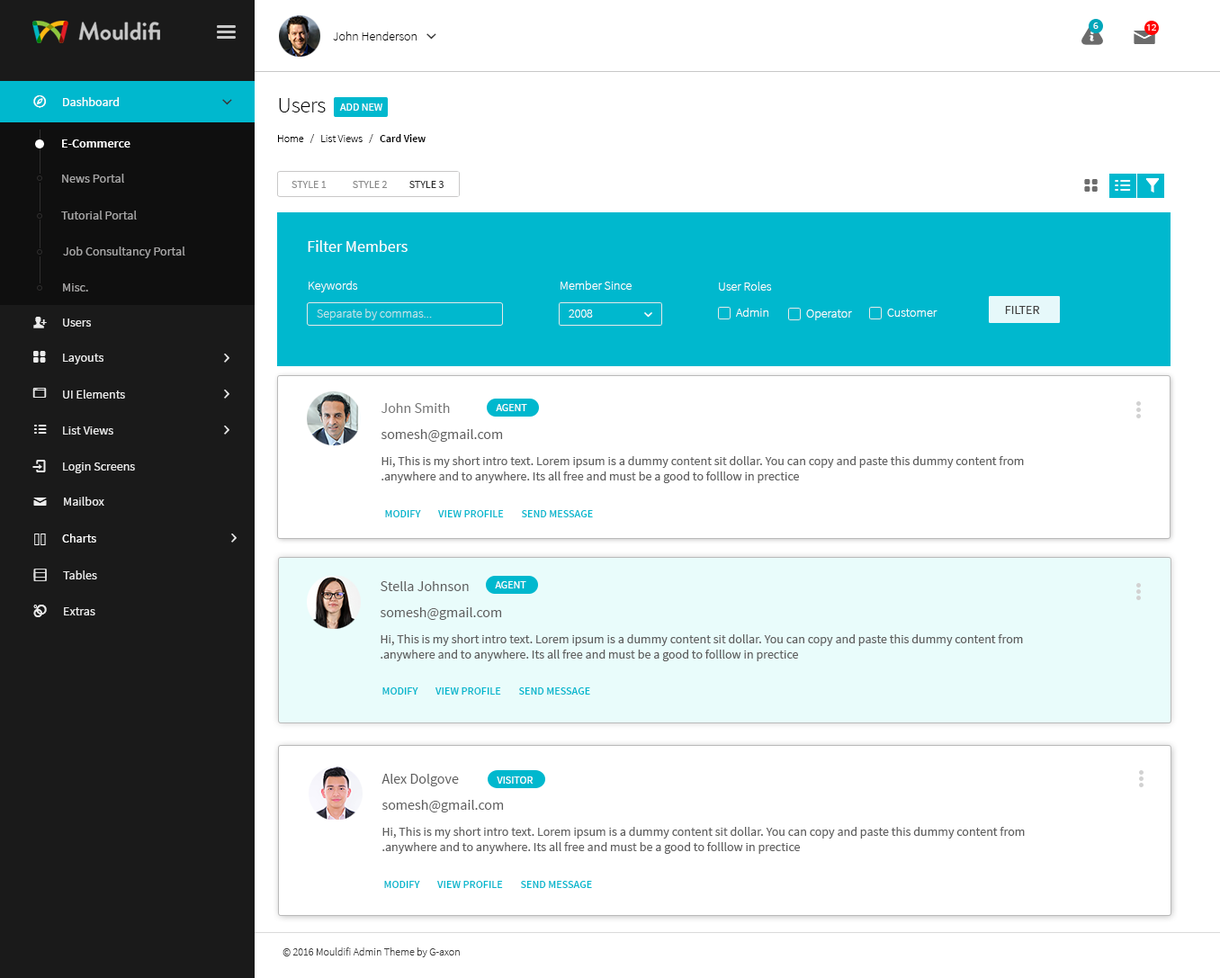
<style>
.page{position:relative;width:1220px;height:978px;background:#ffffff}
.page>*{position:absolute;margin:0}
.t1{font:9px "OpenSans";color:#ffffff}
.t2{font:12.6px "SourceSansPro-Light";color:#000000}
.t3{font:12.6px "SourceSansPro-Regular";color:#ffffff}
.t4{font:12.6px "SourceSansPro-Regular";color:#ffffff;font-variant:small-caps}
.t5{font:21.6px "SourceSansPro-Light";color:#000000}
.t6{font:10.8px "SourceSansPro-Regular";color:#ffffff;text-transform:uppercase}
.t7{font:10.8px "SourceSansPro-Light";color:#000000}
.t8{font:10.8px "SourceSansPro-Semibold";color:#000000}
.t9{font:12.6px "SourceSansPro-Semibold";color:#ffffff}
.t10{font:12.6px "SourceSansPro-Regular";color:#a6a5a5}
.t11{font:10.8px "SourceSansPro-Regular";color:#8f8f8f;text-transform:uppercase}
.t12{font:10.8px "SourceSansPro-Regular";color:#8a8a8a;text-transform:uppercase}
.t13{font:10.8px "SourceSansPro-Regular";color:#2b2b2b;text-transform:uppercase}
.t14{font:12.3px "SourceSansPro-Regular";color:#a6a5a5}
.t15{font:16.2px "SourceSansPro-Regular";color:#ffffff}
.t16{font:12.6px "SourceSansPro-Light";color:#ffffff}
.t17{font:12.6px "SourceSansPro-Regular";color:#424242;text-transform:uppercase}
.t18{font:12.6px "SourceSansPro-Light";color:#c4e5e9}
.t19{font:12.6px "SourceSansPro-Light";color:#fefefe}
.t20{font:12.6px "SourceSansPro-Light";color:#feffff}
.t21{font:12.6px "SourceSansPro-Regular";color:#ebebeb}
.t22{font:14.4px "SourceSansPro-Regular";color:#767676}
.t23{font:14.4px "SourceSansPro-Regular";color:#5e5e5e}
.t24{font:12.6px "SourceSansPro-Regular";color:#5e5e5e}
.t25{font:10.8px "SourceSansPro-Semibold";color:#00b8ce;text-transform:uppercase}
.t26{font:12.3px "SourceSansPro-Regular";color:#ebebeb}
.t27{font:10.8px "SourceSansPro-Light";color:#3e3e3e}
</style>
<div class="page">
<p class="t1" style="left:1093px;top:22px;width:5px;height:7px">6</p>
<p class="t1" style="left:1146px;top:24px;width:10px;height:7px">12</p>
<p class="t2" style="left:333px;top:31px;width:83px;height:9px">John Henderson</p>
<p class="t3" style="left:63px;top:97px;width:56px;height:9px"><span class="t4">D</span>ashboard</p>
<p class="t5" style="left:279px;top:98px;width:47px;height:14px">Users</p>
<p class="t6" style="left:339px;top:103px;width:43px;height:8px">add new</p>
<p class="t7" style="left:278px;top:134px;width:147px;height:9px">Home   /   List Views   /  <span class="t8"> Card View</span></p>
<p class="t9" style="left:62px;top:139px;width:68px;height:9px">E-Commerce</p>
<p class="t10" style="left:62px;top:174px;width:62px;height:9px">News Portal</p>
<p class="t11" style="left:291px;top:181px;width:152px;height:7px">Style 1            <span class="t12">Style 2          </span><span class="t13">Style 3</span></p>
<p class="t14" style="left:61px;top:210px;width:76px;height:9px">Tutorial Portal</p>
<p class="t15" style="left:308px;top:240px;width:99px;height:12px">Filter Members</p>
<p class="t14" style="left:63px;top:246px;width:122px;height:12px">Job Consultancy Portal</p>
<p class="t16" style="left:309px;top:281px;width:49px;height:11px">Keywords</p>
<p class="t16" style="left:560px;top:281px;width:71px;height:9px">Member Since</p>
<p class="t16" style="left:719px;top:282px;width:53px;height:9px">User Roles</p>
<p class="t14" style="left:63px;top:283px;width:25px;height:8px">Misc.</p>
<p class="t17" style="left:1005px;top:306px;width:35px;height:8px">filter</p>
<p class="t18" style="left:317px;top:309px;width:115px;height:11px">Separate by commas...</p>
<p class="t19" style="left:568px;top:309px;width:25px;height:9px">2008</p>
<p class="t20" style="left:736px;top:308px;width:32px;height:9px">Admin</p>
<p class="t20" style="left:806px;top:309px;width:46px;height:11px">Operator</p>
<p class="t20" style="left:887px;top:309px;width:50px;height:8px">Customer</p>
<p class="t21" style="left:63px;top:318px;width:28px;height:8px">Users</p>
<p class="t21" style="left:63px;top:353px;width:40px;height:11px">Layouts</p>
<p class="t21" style="left:63px;top:389px;width:62px;height:9px">UI Elements</p>
<p class="t22" style="left:381px;top:403px;width:69px;height:10px">John Smith</p>
<p class="t6" style="left:496px;top:404px;width:31px;height:7px">Agent</p>
<p class="t21" style="left:63px;top:426px;width:50px;height:8px">List Views</p>
<p class="t23" style="left:381px;top:429px;width:122px;height:13px">somesh@gmail.com</p>
<p class="t24" style="left:381px;top:456px;width:643px;height:27px;text-align:right">Hi, This is my short intro text. Lorem ipsum is a dummy content sit dollar. You can copy and paste this dummy content from anywhere and to anywhere. Its all free and must be a good to folllow in prectice.</p>
<p class="t21" style="left:63px;top:462px;width:72px;height:11px">Login Screens</p>
<p class="t21" style="left:64px;top:496px;width:40px;height:9px">Mailbox</p>
<p class="t25" style="left:385px;top:510px;width:208px;height:7px">modify        view profile        send message</p>
<p class="t3" style="left:62px;top:533px;width:34px;height:9px">Charts</p>
<p class="t26" style="left:63px;top:570px;width:34px;height:9px">Tables</p>
<p class="t23" style="left:380px;top:581px;width:89px;height:10px">Stella Johnson</p>
<p class="t6" style="left:495px;top:581px;width:31px;height:7px">Agent</p>
<p class="t26" style="left:64px;top:607px;width:31px;height:8px">Extras</p>
<p class="t23" style="left:380px;top:607px;width:122px;height:13px">somesh@gmail.com</p>
<p class="t24" style="left:380px;top:634px;width:643px;height:27px;text-align:right">Hi, This is my short intro text. Lorem ipsum is a dummy content sit dollar. You can copy and paste this dummy content from anywhere and to anywhere. Its all free and must be a good to folllow in prectice.</p>
<p class="t25" style="left:382px;top:687px;width:208px;height:7px">modify        view profile        send message</p>
<p class="t23" style="left:381px;top:774px;width:78px;height:12px">Alex Dolgove</p>
<p class="t6" style="left:496px;top:776px;width:37px;height:7px">visitor</p>
<p class="t23" style="left:382px;top:800px;width:122px;height:12px">somesh@gmail.com</p>
<p class="t24" style="left:382px;top:827px;width:642px;height:27px;text-align:right">Hi, This is my short intro text. Lorem ipsum is a dummy content sit dollar. You can copy and paste this dummy content from anywhere and to anywhere. Its all free and must be a good to folllow in prectice.</p>
<p class="t25" style="left:384px;top:881px;width:208px;height:7px">modify        view profile        send message</p>
<p class="t27" style="left:282px;top:947px;width:178px;height:10px">© 2016 Mouldifi Admin Theme by G-axon</p>
</div>
